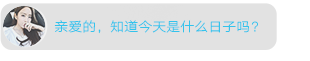
<style>
.page{position:relative;width:310px;height:61px;background:#e2e2e2}
.page>*{position:absolute;margin:0}
.t1{font:14px "HYQiHeiY1-CEW";color:#33c3ec}
</style>
<div class="page">
<p class="t1" style="left:54px;top:20px;width:204px;height:14px">亲爱的，知道今天是什么日子吗？</p>
</div>
